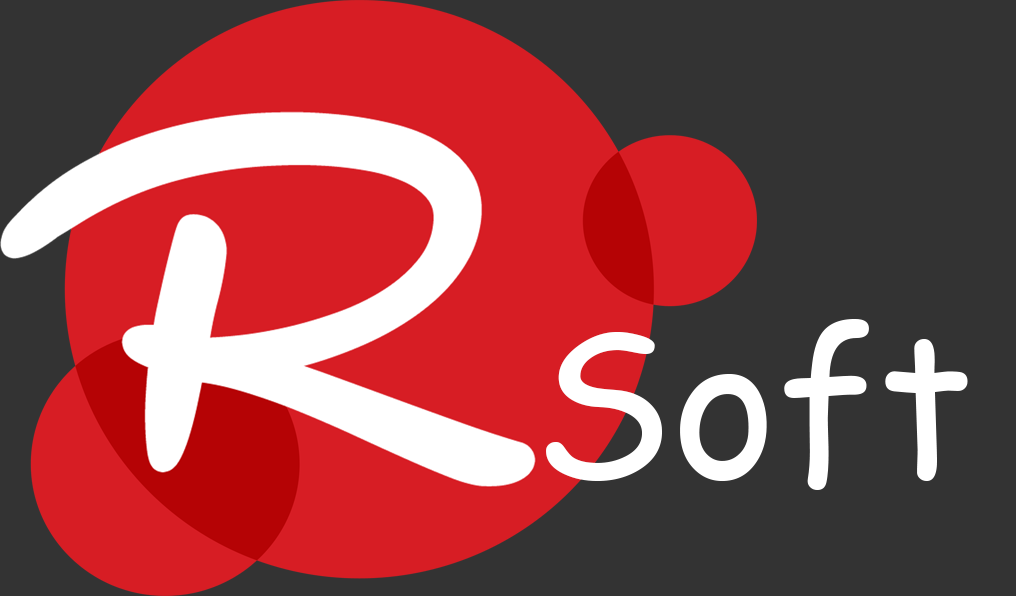
<style>
.page{position:relative;width:1016px;height:596px;background:#333333}
.page>*{position:absolute;margin:0}
.t1{font:200px "ComicSansMS";color:#ffffff}
</style>
<div class="page">
<p class="t1" style="left:546px;top:319px;width:422px;height:171px">Soft</p>
</div>
